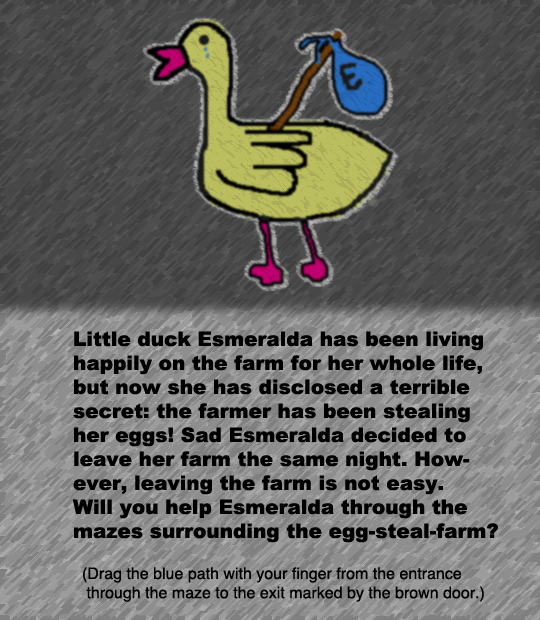
<style>
.page{position:relative;width:540px;height:620px}
.page>*{position:absolute;margin:0}
.t1{font:20px "Arial-Black";color:#000000}
.t2{font:16px "Helvetica";color:#000000}
</style>
<div class="page">
<p class="t1" style="left:72px;top:331px;width:426px;height:212px">Little duck Esmeralda has been living<br>happily on the farm for her whole life,<br>but now she has disclosed a terrible<br>secret: the farmer has been stealing<br>her eggs! Sad Esmeralda decided to<br>leave her farm the same night. How-<br>ever, leaving the farm is not easy.<br>Will you help Esmeralda through the<br>mazes surrounding the egg-steal-farm?</p>
<p class="t2" style="left:83px;top:567px;width:401px;height:35px">(Drag the blue path with your finger from the entrance<br> through the maze to the exit marked by the brown door.)</p>
</div>
